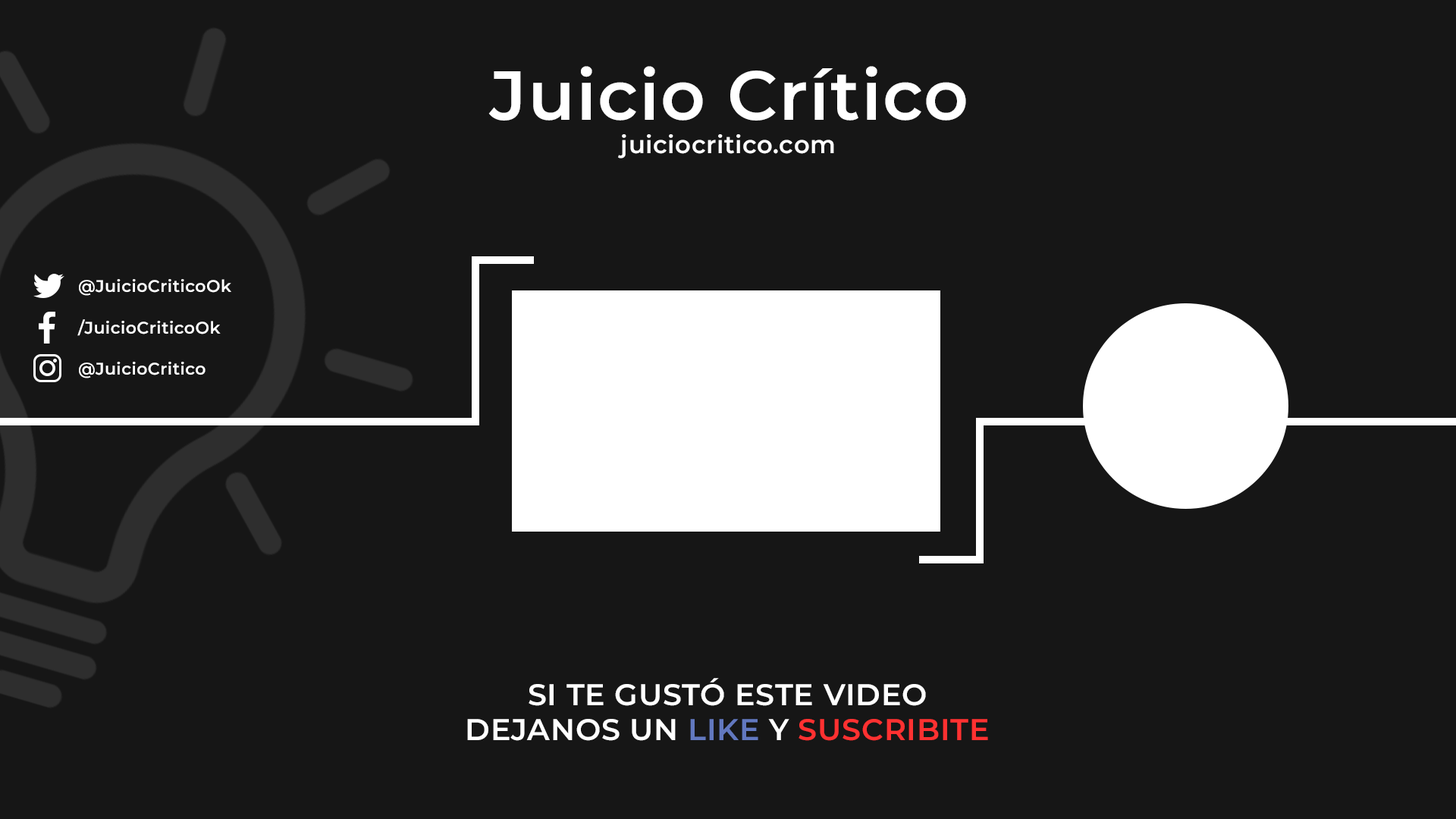
<style>
.page{position:relative;width:1456px;height:819px;background:#161616}
.page>*{position:absolute;margin:0}
.t1{font:69.3px "Montserrat-SemiBold";letter-spacing:0.02em;color:#ffffff}
.t2{font:24.4px "Montserrat-SemiBold";letter-spacing:0.02em;color:#ffffff}
.t3{font:16.7px "Montserrat-SemiBold";letter-spacing:0.02em;color:#ffffff}
.t4{font:30px "Montserrat-SemiBold";letter-spacing:0.02em;color:#ffffff}
.t5{font:30px "Montserrat-SemiBold";letter-spacing:0.02em;color:#6278bf}
.t6{font:30px "Montserrat-SemiBold";letter-spacing:0.02em;color:#ff3131}
</style>
<div class="page">
<p class="t1" style="left:488px;top:66px;width:478px;height:55px">Juicio Crítico</p>
<p class="t2" style="left:618px;top:134px;width:216px;height:24px">juiciocritico.com</p>
<p class="t3" style="left:79px;top:279px;width:152px;height:17px">@JuicioCriticoOk</p>
<p class="t3" style="left:77px;top:319px;width:144px;height:17px">/JuicioCriticoOk</p>
<p class="t3" style="left:79px;top:362px;width:127px;height:16px">@JuicioCritico</p>
<p class="t4" style="left:529px;top:678px;width:397px;height:28px">SI TE GUSTÓ ESTE VIDEO</p>
<p class="t4" style="left:467px;top:719px;width:521px;height:22px">DEJANOS UN <span class="t5">LIKE</span> Y <span class="t6">SUSCRIBITE</span></p>
</div>
